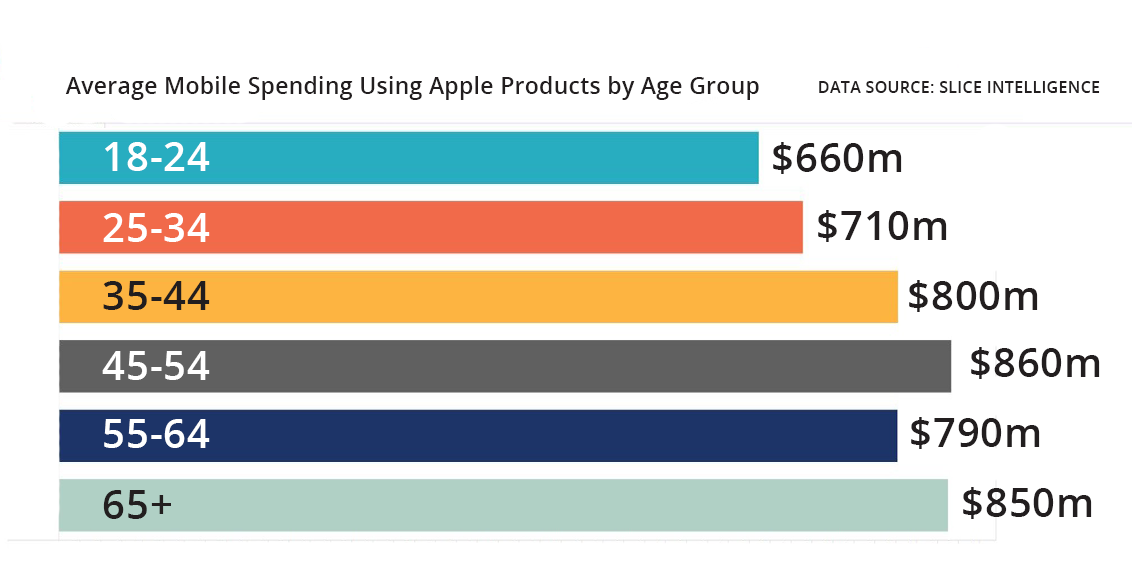
<style>
.page{position:relative;width:1132px;height:565px;background:#ffffff}
.page>*{position:absolute;margin:0}
.t1{font:22.7px "OpenSans-Semibold";letter-spacing:0.02em;color:#221e1f}
.t2{font:16px "OpenSans-Semibold";letter-spacing:0.02em;color:#221e1f}
.t3{font:40px "OpenSans-Semibold";letter-spacing:0.02em;color:#ffffff}
.t4{font:40px "OpenSans-Semibold";letter-spacing:0.02em;color:#221e1f}
</style>
<div class="page">
<p class="t1" style="left:65px;top:76px;width:694px;height:24px">Average Mobile Spending Using Apple Products by Age Group</p>
<p class="t2" style="left:819px;top:81px;width:281px;height:12px">DATA SOURCE: SLICE INTELLIGENCE</p>
<p class="t3" style="left:105px;top:142px;width:105px;height:29px">18-24</p>
<p class="t4" style="left:773px;top:142px;width:129px;height:32px">$660m</p>
<p class="t3" style="left:103px;top:213px;width:107px;height:29px">25-34</p>
<p class="t4" style="left:818px;top:210px;width:129px;height:32px">$710m</p>
<p class="t4" style="left:103px;top:281px;width:107px;height:29px">35-44</p>
<p class="t4" style="left:909px;top:280px;width:129px;height:32px">$800m</p>
<p class="t3" style="left:102px;top:351px;width:108px;height:29px">45-54</p>
<p class="t4" style="left:971px;top:347px;width:129px;height:32px">$860m</p>
<p class="t3" style="left:104px;top:419px;width:106px;height:29px">55-64</p>
<p class="t4" style="left:911px;top:417px;width:129px;height:32px">$790m</p>
<p class="t4" style="left:103px;top:490px;width:68px;height:29px">65+</p>
<p class="t4" style="left:963px;top:487px;width:129px;height:32px">$850m</p>
</div>
